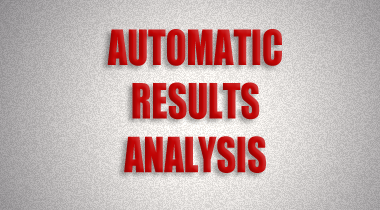
<style>
.page{position:relative;width:380px;height:210px}
.page>*{position:absolute;margin:0}
.t1{font:44.7px "Impact";scale:0.85 1}
</style>
<div class="page">
<p class="t1" style="left:107px;top:29px;width:175px;height:144px;text-align:center">AUTOMATIC<br>RESULTS<br>ANALYSIS</p>
</div>
